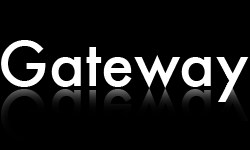
<style>
.page{position:relative;width:250px;height:150px;background:#000000}
.page>*{position:absolute;margin:0}
.t1{font:60px "Futura-Medium";color:#ffffff}
</style>
<div class="page">
<p class="t1" style="left:1px;top:40px;width:248px;height:62px">Gateway</p>
</div>
